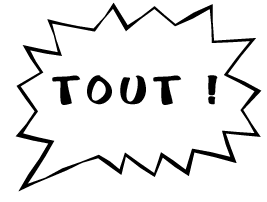
<style>
.page{position:relative;width:267px;height:202px;background:#ffffff}
.page>*{position:absolute;margin:0}
.t1{font:48px "Cartoon";letter-spacing:0.1em;color:#000000}
</style>
<div class="page">
<p class="t1" style="left:52px;top:75px;width:166px;height:30px">TOUT !</p>
</div>
